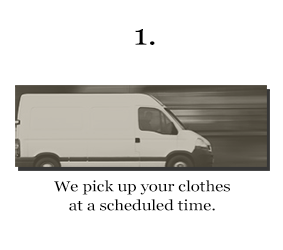
<style>
.page{position:relative;width:283px;height:250px;background:#ffffff}
.page>*{position:absolute;margin:0}
.t1{font:28.9px "Georgia";color:#000000;scale:1.16 1}
.t2{font:14.5px "Georgia";color:#000000;scale:1.16 1}
</style>
<div class="page">
<p class="t1" style="left:135px;top:29px;width:20px;height:16px">1.</p>
<p class="t2" style="left:54px;top:180px;width:176px;height:31px;text-align:center">We pick up your clothes<br>at a scheduled time.</p>
</div>
